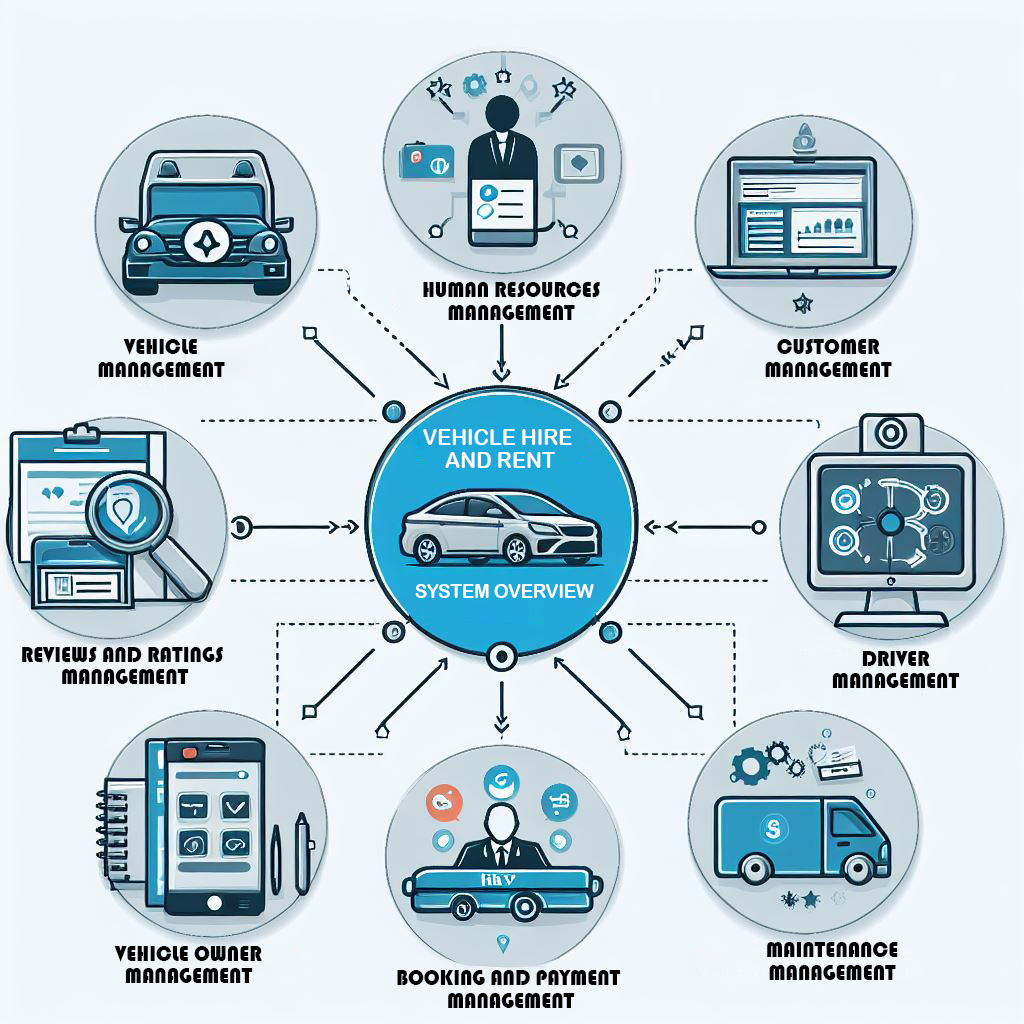
<style>
.page{position:relative;width:1024px;height:1024px}
.page>*{position:absolute;margin:0}
.t1{font:22px/22.7px "Bauhaus93";letter-spacing:-0.011em;color:#000000;text-transform:uppercase}
.t2{font:22px/22.7px "ArialRoundedMTBold";letter-spacing:-0.011em;color:#ffffff;text-transform:uppercase}
.t3{font:19.2px "ArialRoundedMTBold";letter-spacing:-0.011em;color:#ffffff;text-transform:uppercase}
</style>
<div class="page">
<p class="t1" style="left:423px;top:282px;width:177px;height:38px;text-align:center">Human Resources <br>Management</p>
<p class="t1" style="left:98px;top:339px;width:127px;height:38px;text-align:center">Vehicle <br>Management</p>
<p class="t1" style="left:765px;top:339px;width:127px;height:38px;text-align:center">Customer <br>management</p>
<p class="t2" style="left:423px;top:429px;width:149px;height:39px;text-align:center">Vehicle Hire <br>and Rent</p>
<p class="t3" style="left:415px;top:584px;width:179px;height:14px">System Overview</p>
<p class="t1" style="left:22px;top:647px;width:201px;height:37px;text-align:center">Reviews and Ratings<br> Management</p>
<p class="t1" style="left:832px;top:651px;width:128px;height:37px;text-align:center">Driver <br>Management</p>
<p class="t1" style="left:767px;top:942px;width:131px;height:38px;text-align:center">Maintenance <br>Management</p>
<p class="t1" style="left:114px;top:946px;width:148px;height:37px;text-align:center">Vehicle Owner <br>Management</p>
<p class="t1" style="left:397px;top:970px;width:224px;height:38px;text-align:center">Booking And PaymenT <br>Management</p>
</div>
